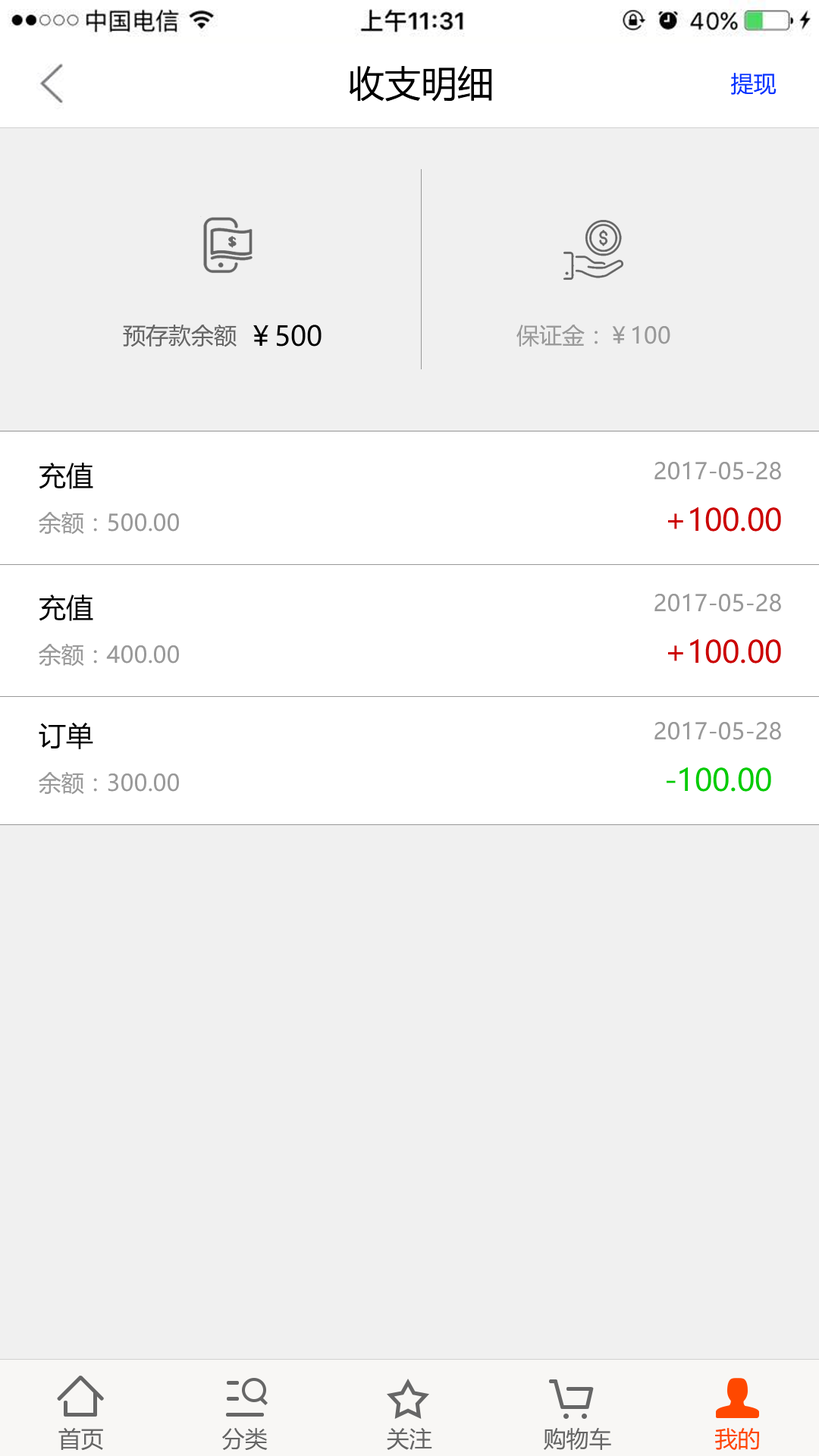
<style>
.page{position:relative;width:819px;height:1456px;background:#f0f0f0}
.page>*{position:absolute;margin:0}
.t1{font:36.4px "MicrosoftYaHei";color:#000000}
.t2{font:22.7px "MicrosoftYaHei";color:#0033ff}
.t3{font:22.7px "MicrosoftYaHei";color:#666666}
.t4{font:27.3px "MicrosoftYaHei";color:#000000}
.t5{font:22.7px "MicrosoftYaHei";color:#999999}
.t6{font:30.3px "MicrosoftYaHei";color:#cc0000}
.t7{font:30.3px "MicrosoftYaHei";color:#00cc00}
.t8{font:22.7px "MicrosoftYaHei";color:#ff4800}
</style>
<div class="page">
<p class="t1" style="left:349px;top:65px;width:143px;height:37px">收支明细</p>
<p class="t2" style="left:731px;top:73px;width:46px;height:22px">提现</p>
<p class="t3" style="left:123px;top:325px;width:114px;height:22px">预存款余额</p>
<p class="t4" style="left:253px;top:325px;width:69px;height:22px">￥500</p>
<p class="t5" style="left:516px;top:325px;width:154px;height:22px">保证金：￥100</p>
<p class="t5" style="left:654px;top:461px;width:127px;height:19px">2017-05-28</p>
<p class="t4" style="left:39px;top:463px;width:54px;height:26px">充值</p>
<p class="t6" style="left:668px;top:507px;width:113px;height:25px">+100.00</p>
<p class="t5" style="left:39px;top:512px;width:140px;height:23px">余额：500.00</p>
<p class="t5" style="left:654px;top:593px;width:127px;height:19px">2017-05-28</p>
<p class="t4" style="left:39px;top:595px;width:54px;height:26px">充值</p>
<p class="t6" style="left:668px;top:639px;width:113px;height:25px">+100.00</p>
<p class="t5" style="left:39px;top:644px;width:140px;height:23px">余额：400.00</p>
<p class="t4" style="left:39px;top:723px;width:54px;height:26px">订单</p>
<p class="t5" style="left:654px;top:721px;width:127px;height:19px">2017-05-28</p>
<p class="t5" style="left:39px;top:772px;width:140px;height:23px">余额：300.00</p>
<p class="t7" style="left:667px;top:767px;width:104px;height:25px">-100.00</p>
<p class="t3" style="left:58px;top:1428px;width:45px;height:23px">首页</p>
<p class="t3" style="left:222px;top:1428px;width:46px;height:23px">分类</p>
<p class="t3" style="left:387px;top:1428px;width:45px;height:22px">关注</p>
<p class="t3" style="left:544px;top:1428px;width:67px;height:22px">购物车</p>
<p class="t8" style="left:715px;top:1428px;width:44px;height:22px">我的</p>
</div>
